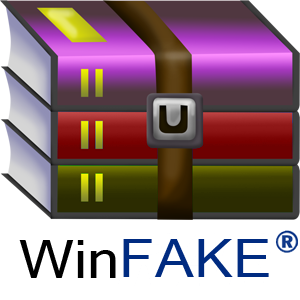
<style>
.page{position:relative;width:300px;height:300px;background:#ffffff}
.page>*{position:absolute;margin:0}
.t1{font:52.7px "MicrosoftSansSerif";color:#000000;scale:1.11 1}
.t2{font:52.7px "MicrosoftSansSerif";color:#002b81;scale:1.11 1}
</style>
<div class="page">
<p class="t1" style="left:19px;top:240px;width:97px;height:38px">Win</p>
<p class="t2" style="left:123px;top:239px;width:146px;height:38px">FAKE</p>
</div>
